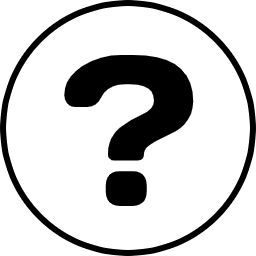
<style>
.page{position:relative;width:256px;height:256px;background:#ffffff}
.page>*{position:absolute;margin:0}
.t1{font:213px "DaysOne-Regular";color:#000000}
</style>
<div class="page">
<p class="t1" style="left:64px;top:54px;width:130px;height:152px">?</p>
</div>
